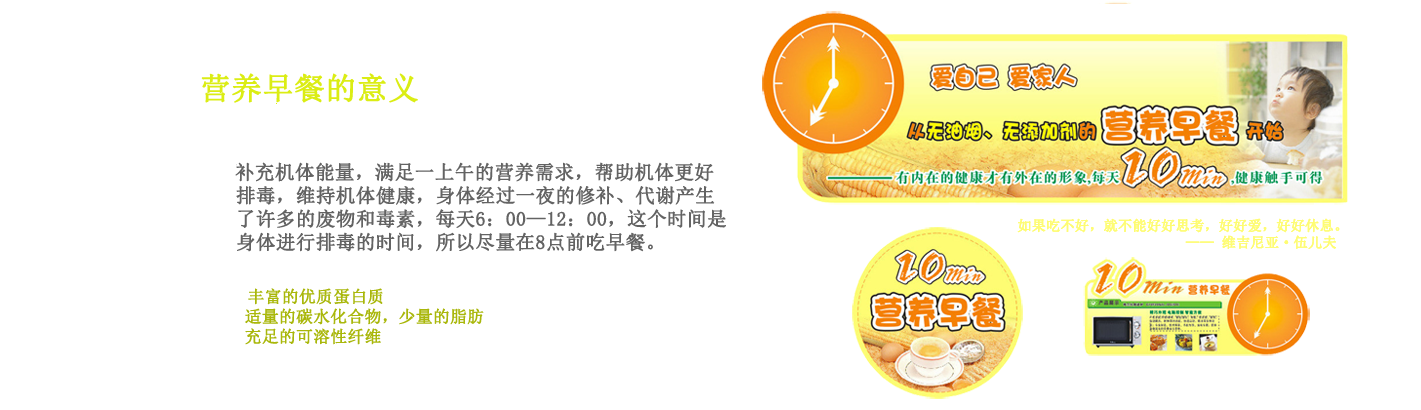
<style>
.page{position:relative;width:1421px;height:410px;background:#ffffff}
.page>*{position:absolute;margin:0}
.t1{font:19.4px "SimSun";color:#636363;font-weight:bold}
.t2{font:30.6px "SimSun";color:#dbed14;font-weight:bold}
.t3{font:16.7px "SimSun";color:#a9b70b;font-weight:bold}
</style>
<div class="page">
<p class="t1" style="left:201px;top:73px;width:525px;height:272px"><span class="t2">营养早餐的意义<br><br><br>   </span>补充机体能量，满足一上午的营养需求，帮助机体更好<br> 排毒，维持机体健康，身体经过一夜的修补、代谢产生<br> 了许多的废物和毒素，每天6：00—12：00，这个时间是<br> 身体进行排毒的时间，所以尽量在8点前吃早餐。<br><br>  <span class="t3">丰富的优质蛋白质<br>  适量的碳水化合物，少量的脂肪<br>  充足的可溶性纤维</span></p>
</div>
